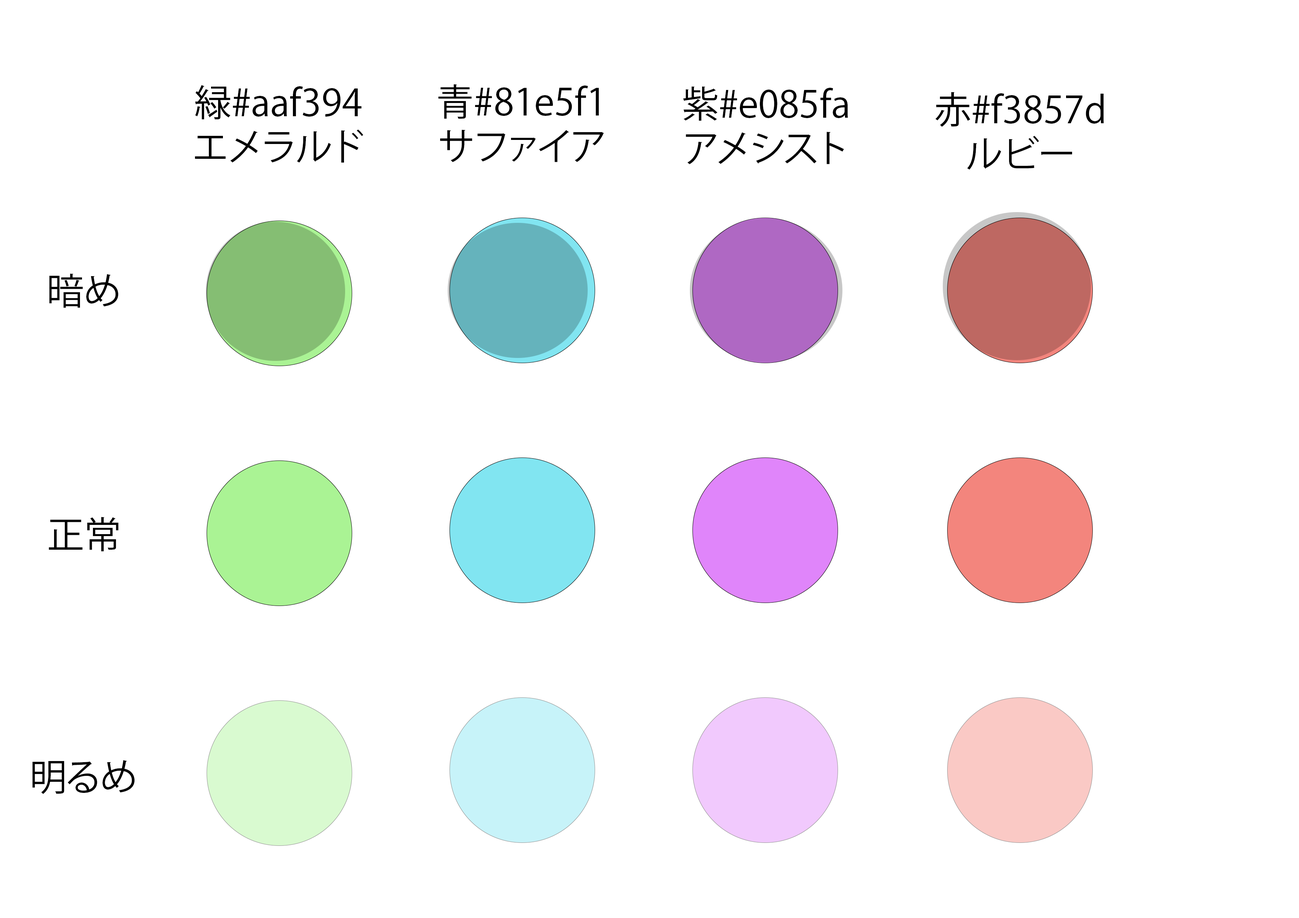
<style>
.page{position:relative;width:1299px;height:918px;background:#ffffff}
.page>*{position:absolute;margin:0}
.t1{font:37px "KozGoPr6N-Regular";color:#000000}
</style>
<div class="page">
<p class="t1" style="left:195px;top:85px;width:168px;height:78px;text-align:center">緑#aaf394<br>エメラルド</p>
<p class="t1" style="left:438px;top:84px;width:166px;height:78px;text-align:center">青#81e5f1<br>サファイア</p>
<p class="t1" style="left:683px;top:86px;width:165px;height:78px;text-align:center">紫#e085fa<br>アメシスト</p>
<p class="t1" style="left:935px;top:92px;width:169px;height:78px;text-align:center">赤#f3857d<br>ルビー</p>
<p class="t1" style="left:49px;top:274px;width:69px;height:34px">暗め</p>
<p class="t1" style="left:49px;top:517px;width:69px;height:35px">正常</p>
<p class="t1" style="left:32px;top:760px;width:103px;height:34px">明るめ</p>
</div>
